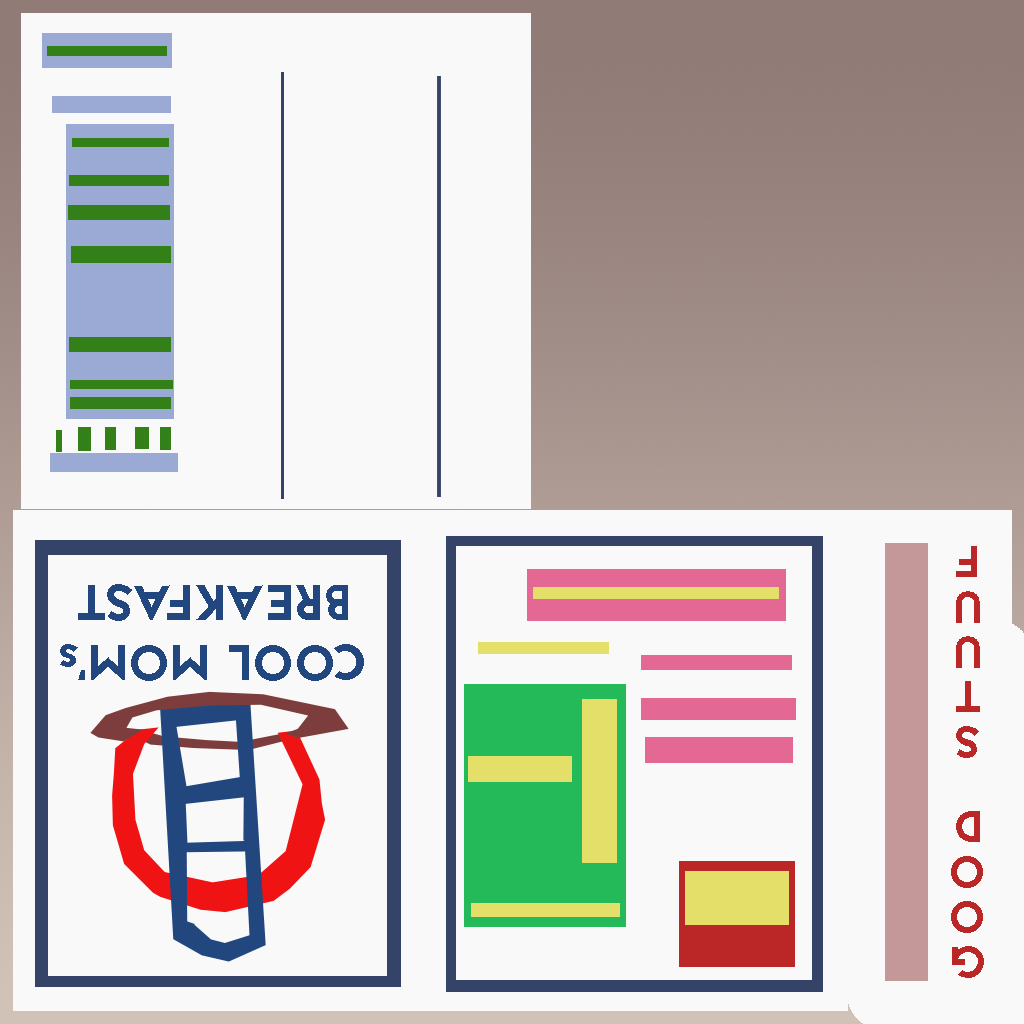
<style>
.page{position:relative;width:1024px;height:1024px;background:#f9f9f9}
.page>*{position:absolute;margin:0}
.t1{font:50px "Jaapokki-Regular";color:#22477e}
</style>
<div class="page">
<p class="t1" style="left:60px;top:584px;width:304px;height:97px;rotate:180deg">COOL MOM’s BREAKFAST</p>
</div>
